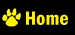
<style>
.page{position:relative;width:75px;height:35px;background:#000000}
.page>*{position:absolute;margin:0}
.t1{font:20px "FranklinGotT-DemCon";color:#fff100}
</style>
<div class="page">
<p class="t1" style="left:26px;top:11px;width:42px;height:14px">Home</p>
</div>
